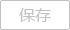
<style>
.page{position:relative;width:70px;height:30px;background:#ffffff}
.page>*{position:absolute;margin:0}
.t1{font:16px "MicrosoftYaHei";color:#c1c1c1}
</style>
<div class="page">
<p class="t1" style="left:19px;top:8px;width:32px;height:14px">保存</p>
</div>
